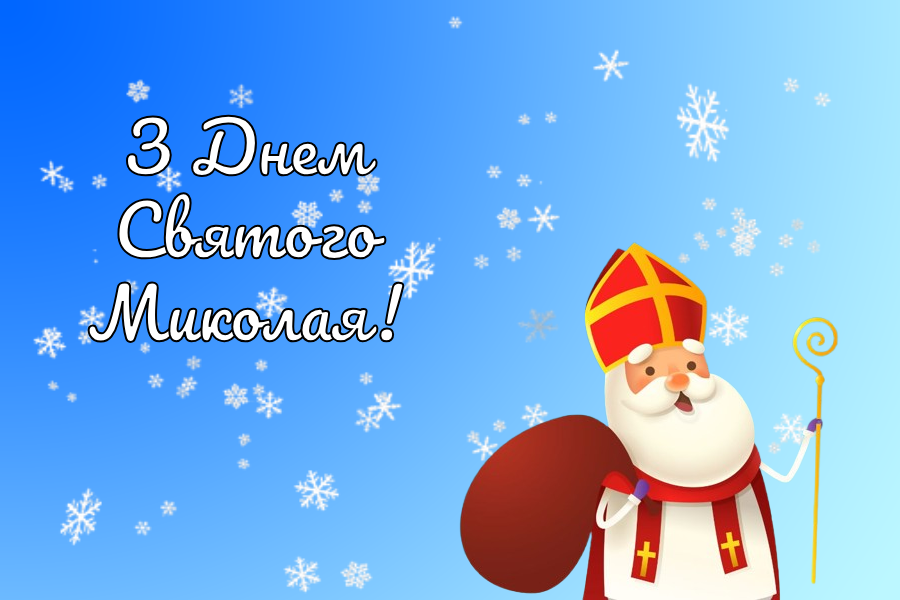
<style>
.page{position:relative;width:900px;height:600px}
.page>*{position:absolute;margin:0}
.t1{font:69px "Pacifico-Regular"}
</style>
<div class="page">
<p class="t1" style="left:86px;top:113px;width:320px;height:231px;text-align:center">З Днем<br>Святого<br>Миколая!</p>
</div>
